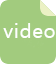
<style>
.page{position:relative;width:56px;height:64px;background:#a2cb7e}
.page>*{position:absolute;margin:0}
.t1{font:18.7px "MicrosoftYaHei";letter-spacing:0.04em;color:#fefffe}
</style>
<div class="page">
<p class="t1" style="left:3px;top:23px;width:52px;height:15px">video</p>
</div>
